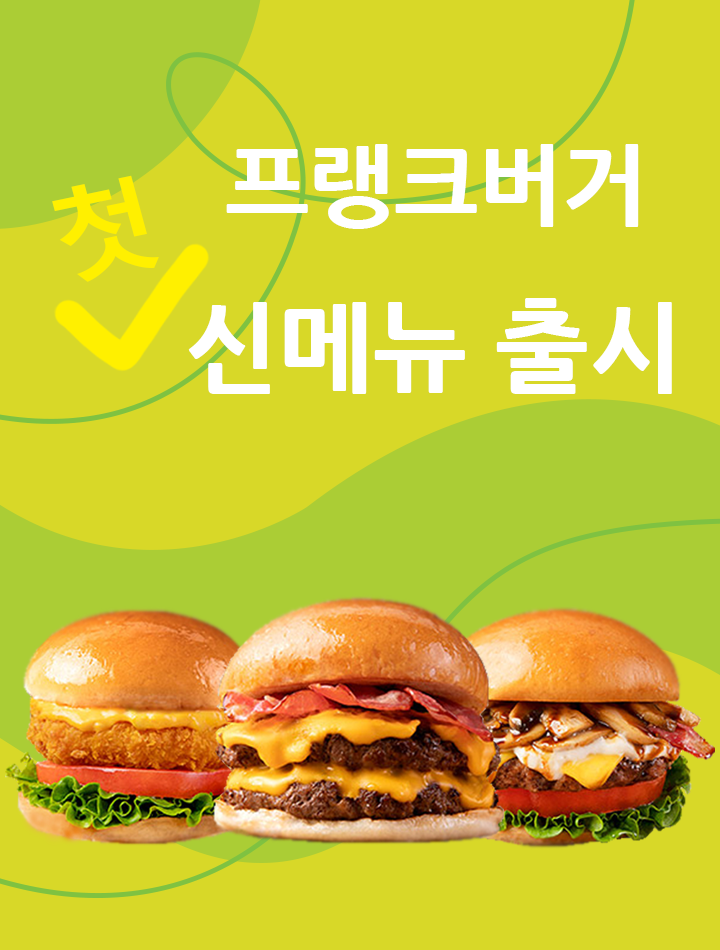
<style>
.page{position:relative;width:720px;height:950px;background:#d8d828}
.page>*{position:absolute;margin:0}
.t1{font:90px "NanumGothicExtraBold";color:#ffffff}
.t2{font:100.9px "MalgunGothicBold";color:#fff000;scale:1.07 1}
.t3{font:100px "NanumGothicExtraBold";color:#ffffff}
</style>
<div class="page">
<p class="t1" style="left:226px;top:144px;width:413px;height:85px">프랭크버거</p>
<p class="t2" style="left:52px;top:175px;width:107px;height:107px;rotate:-12deg">첫</p>
<p class="t3" style="left:188px;top:298px;width:484px;height:96px">신메뉴 출시</p>
</div>
